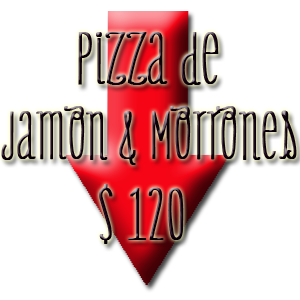
<style>
.page{position:relative;width:300px;height:300px;background:#ffffff}
.page>*{position:absolute;margin:0}
.t1{font:62px "OnlyYouProLight";color:#140114;font-weight:bold}
.t2{font:68px "OnlyYouProLight";color:#140114;font-weight:bold}
</style>
<div class="page">
<p class="t1" style="left:1px;top:32px;width:296px;height:212px"><span class="t2">      Pizza de <br></span>Jamon &amp; Morrones<br><span class="t2">    $ 120</span></p>
</div>
